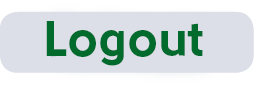
<style>
.page{position:relative;width:254px;height:85px;background:#dcdfe8}
.page>*{position:absolute;margin:0}
.t1{font:50px "Solomon-Sans-Bold";color:#006b2d}
</style>
<div class="page">
<p class="t1" style="left:46px;top:21px;width:157px;height:45px">Logout</p>
</div>
